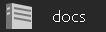
<style>
.page{position:relative;width:106px;height:32px;background:#282828}
.page>*{position:absolute;margin:0}
.t1{font:16px "Ubuntu";color:#ffffff}
</style>
<div class="page">
<p class="t1" style="left:53px;top:10px;width:32px;height:12px">docs</p>
</div>
